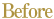
<style>
.page{position:relative;width:54px;height:19px;background:#ffffff}
.page>*{position:absolute;margin:0}
.t1{font:20px "RyuminPro-ExBold";letter-spacing:-0.08em;color:#ae9340;scale:0.9 1}
</style>
<div class="page">
<p class="t1" style="left:2px;top:3px;width:51px;height:15px">Before</p>
</div>
